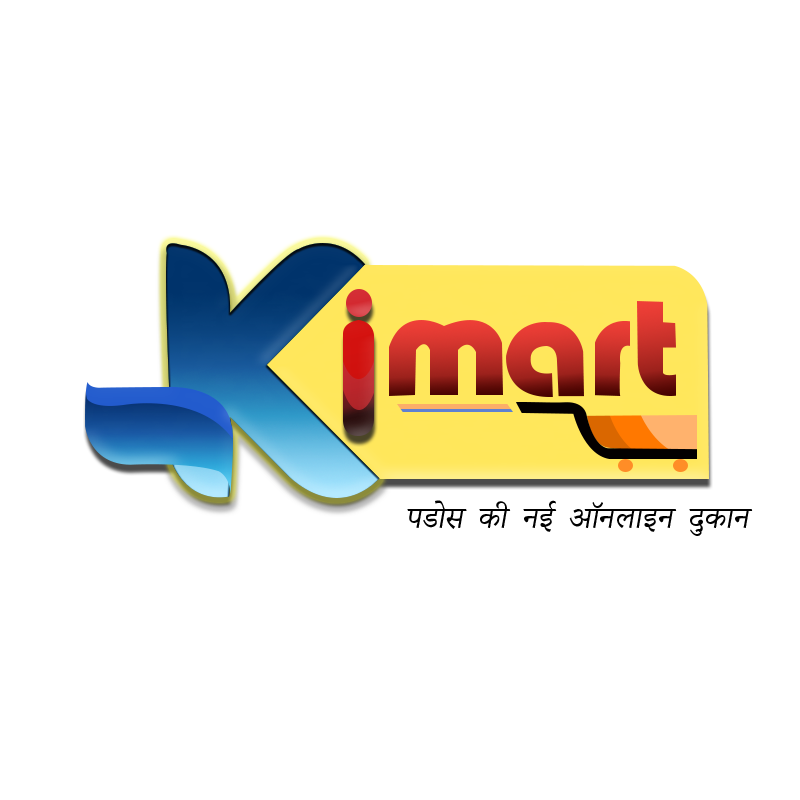
<style>
.page{position:relative;width:800px;height:800px;background:#ffffff}
.page>*{position:absolute;margin:0}
.t1{font:37.4px "AdobeDevanagari-Regular";color:#000000;font-style:italic}
</style>
<div class="page">
<p class="t1" style="left:407px;top:500px;width:346px;height:36px">पडोस की नई ऑनलाइन दुकान</p>
</div>
